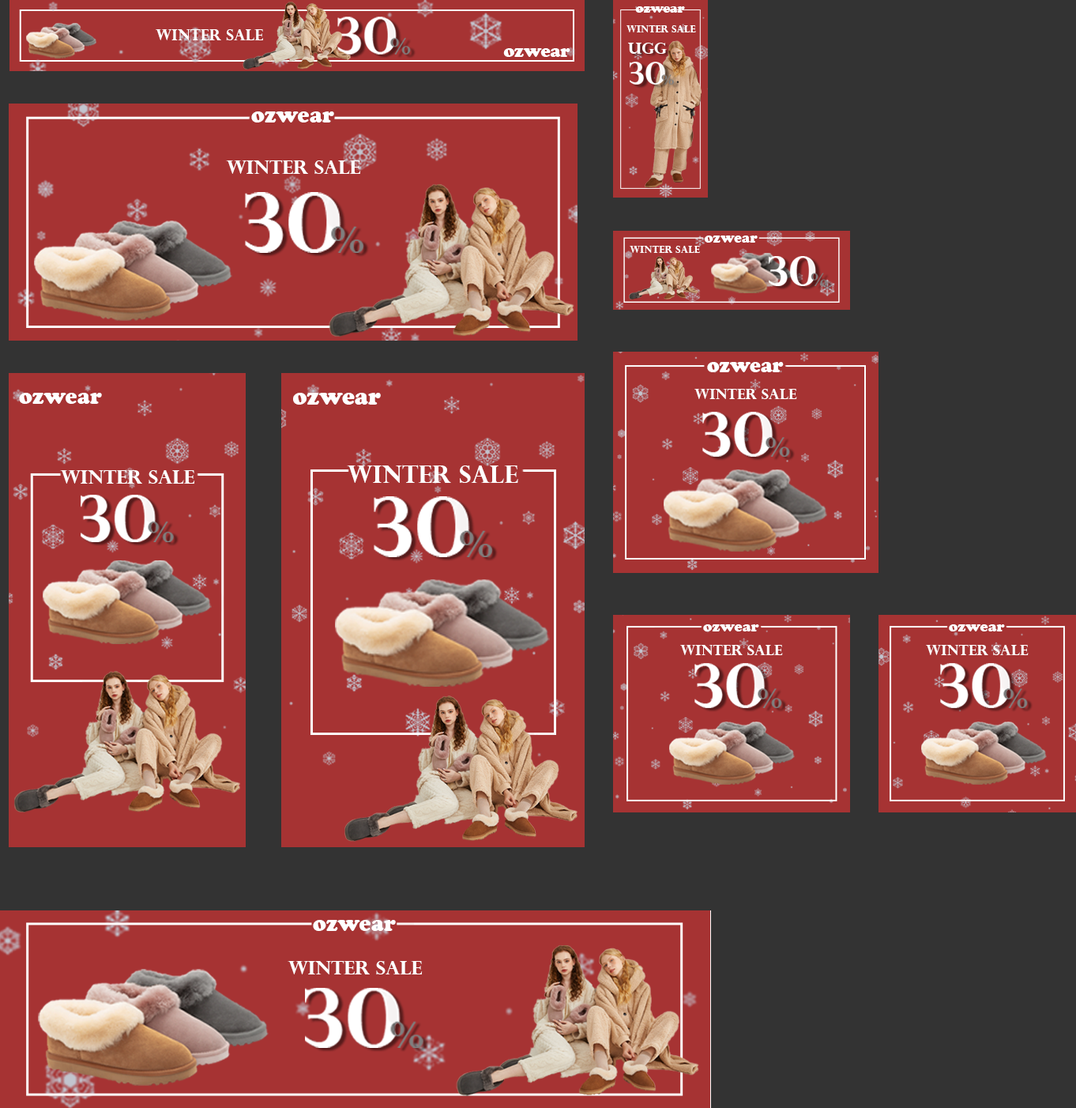
<style>
.page{position:relative;width:1076px;height:1108px;background:#a63333}
.page>*{position:absolute;margin:0}
.t1{font:13.1px "CooperBlack";color:#ffffff}
.t2{font:15px "PerpetuaTitlingMT-Bold";color:#ffffff}
.t3{font:9.6px "PerpetuaTitlingMT-Bold";color:#ffffff}
.t4{font:17.9px "CooperBlack";color:#ffffff}
.t5{font:15.8px "PerpetuaTitlingMT-Bold";color:#ffffff}
.t6{font:22.4px "CooperBlack";color:#ffffff}
.t7{font:18.6px "PerpetuaTitlingMT-Bold";color:#ffffff}
.t8{font:9.7px "PerpetuaTitlingMT-Bold";color:#ffffff}
.t9{font:14.3px "CooperBlack";color:#ffffff}
.t10{font:20.6px "CooperBlack";color:#ffffff}
.t11{font:14.2px "PerpetuaTitlingMT-Bold";color:#ffffff}
.t12{font:23.7px "CooperBlack";color:#ffffff}
.t13{font:23.7px "PerpetuaTitlingMT-Bold";color:#ffffff}
.t14{font:15.1px "CooperBlack";color:#ffffff}
</style>
<div class="page">
<p class="t1" style="left:635px;top:6px;width:50px;height:7px">ozwear</p>
<p class="t2" style="left:156px;top:29px;width:107px;height:11px">winter sale</p>
<p class="t3" style="left:627px;top:25px;width:69px;height:7px">winter sale</p>
<p class="t4" style="left:503px;top:48px;width:68px;height:9px">ozwear</p>
<p class="t5" style="left:628px;top:43px;width:39px;height:11px">ugg</p>
<p class="t6" style="left:251px;top:111px;width:83px;height:11px">ozwear</p>
<p class="t7" style="left:226px;top:160px;width:135px;height:14px">winter sale</p>
<p class="t8" style="left:630px;top:246px;width:70px;height:7px">winter sale</p>
<p class="t9" style="left:705px;top:235px;width:53px;height:8px">ozwear</p>
<p class="t10" style="left:707px;top:362px;width:77px;height:10px">ozwear</p>
<p class="t11" style="left:695px;top:389px;width:102px;height:10px">winter sale</p>
<p class="t6" style="left:19px;top:393px;width:83px;height:11px">ozwear</p>
<p class="t12" style="left:293px;top:393px;width:88px;height:12px">ozwear</p>
<p class="t7" style="left:60px;top:470px;width:135px;height:14px">winter sale</p>
<p class="t13" style="left:347px;top:465px;width:171px;height:18px">winter sale</p>
<p class="t14" style="left:703px;top:624px;width:56px;height:7px">ozwear</p>
<p class="t14" style="left:949px;top:624px;width:56px;height:7px">ozwear</p>
<p class="t11" style="left:680px;top:645px;width:103px;height:10px">winter sale</p>
<p class="t11" style="left:926px;top:645px;width:103px;height:10px">winter sale</p>
<p class="t6" style="left:313px;top:920px;width:83px;height:11px">ozwear</p>
<p class="t7" style="left:288px;top:961px;width:135px;height:13px">winter sale</p>
</div>
